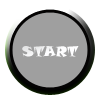
<style>
.page{position:relative;width:100px;height:100px;background:#9f9f9f}
.page>*{position:absolute;margin:0}
.t1{font:14px "SnapITC-Regular";color:#fdfdfe}
</style>
<div class="page">
<p class="t1" style="left:22px;top:46px;width:57px;height:12px">START</p>
</div>
